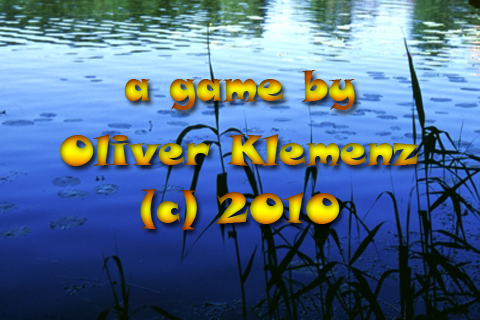
<style>
.page{position:relative;width:480px;height:320px}
.page>*{position:absolute;margin:0}
.t1{font:42px "SnapITC-Regular"}
</style>
<div class="page">
<p class="t1" style="left:124px;top:70px;width:231px;height:40px">a game by</p>
<p class="t1" style="left:60px;top:134px;width:359px;height:32px">Oliver Klemenz</p>
<p class="t1" style="left:140px;top:189px;width:200px;height:41px">(c) 2010</p>
</div>
